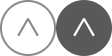
<style>
.page{position:relative;width:112px;height:56px;background:#ffffff}
.page>*{position:absolute;margin:0}
.t1{font:35px "PragmaticaCTT-Regular";color:#888888}
.t2{font:35px "PragmaticaCTT-Regular";color:#ffffff}
</style>
<div class="page">
<p class="t1" style="left:17px;top:18px;width:22px;height:19px;rotate:90deg">&lt;</p>
<p class="t2" style="left:73px;top:18px;width:22px;height:19px;rotate:90deg">&lt;</p>
</div>
